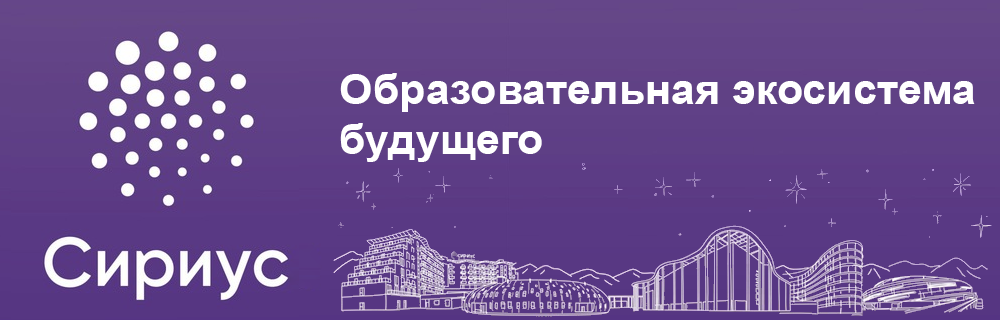
<style>
.page{position:relative;width:1000px;height:320px}
.page>*{position:absolute;margin:0}
.t1{font:41.7px "Arial-BoldMT";color:#ffffff}
</style>
<div class="page">
<p class="t1" style="left:340px;top:73px;width:635px;height:89px">Образовательная экосистема <br>будущего</p>
</div>
